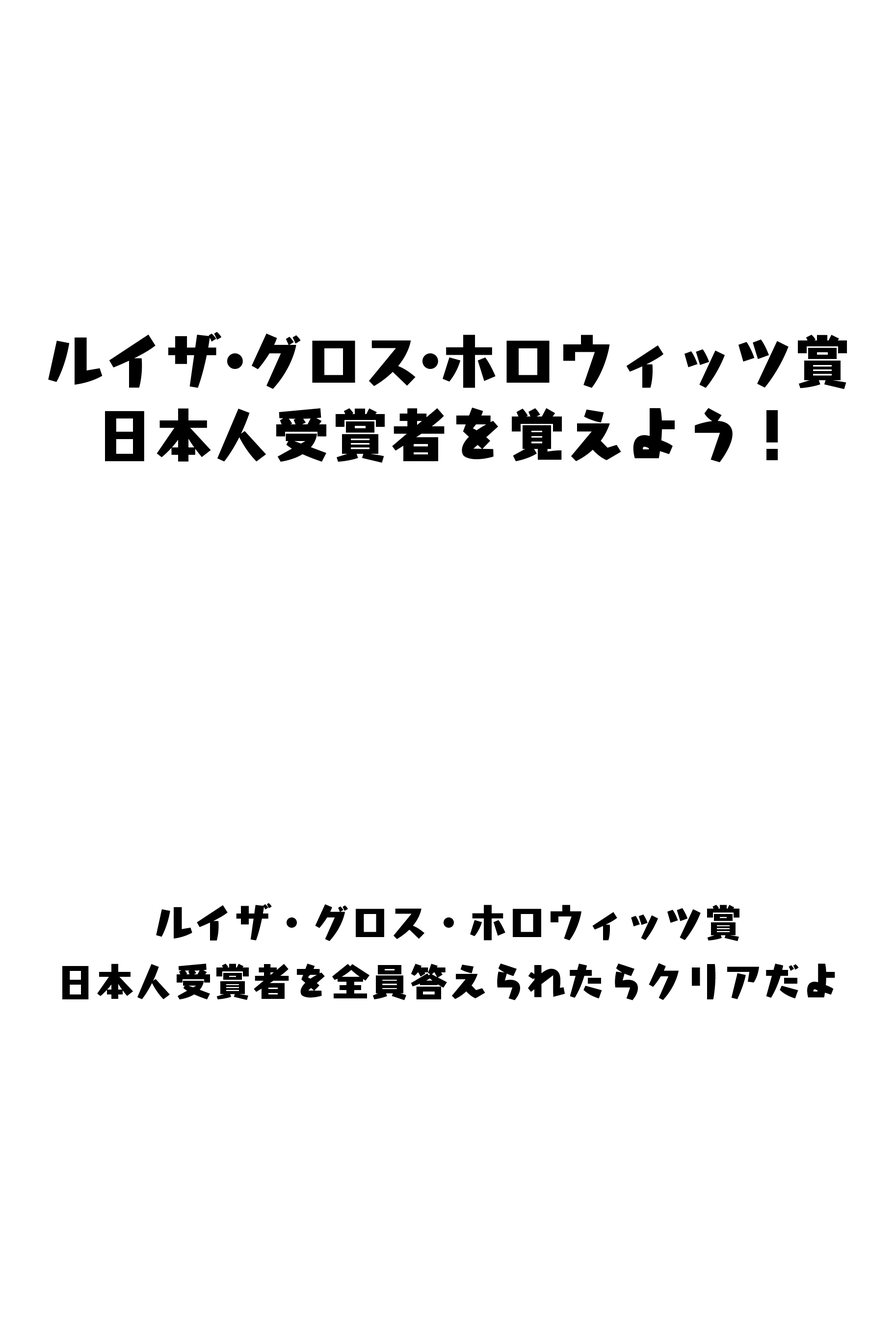
<style>
.page{position:relative;width:895px;height:1332px;background:#ffffff}
.page>*{position:absolute;margin:0}
.t1{font:39.3px/58.9px "KurokaneStd-EB";color:#000000}
.t2{font:58.9px/73.6px "KurokaneStd-EB";color:#000000}
</style>
<div class="page">
<p class="t1" style="left:48px;top:332px;width:799px;height:669px;text-align:center"><span class="t2">ルイザ・グロス・ホロウィッツ賞<br>日本人受賞者を覚えよう！<br><br><br><br><br><br><br><br><br><br><br><br><br></span>ルイザ・グロス・ホロウィッツ賞<br>日本人受賞者を全員答えられたらクリアだよ</p>
</div>
